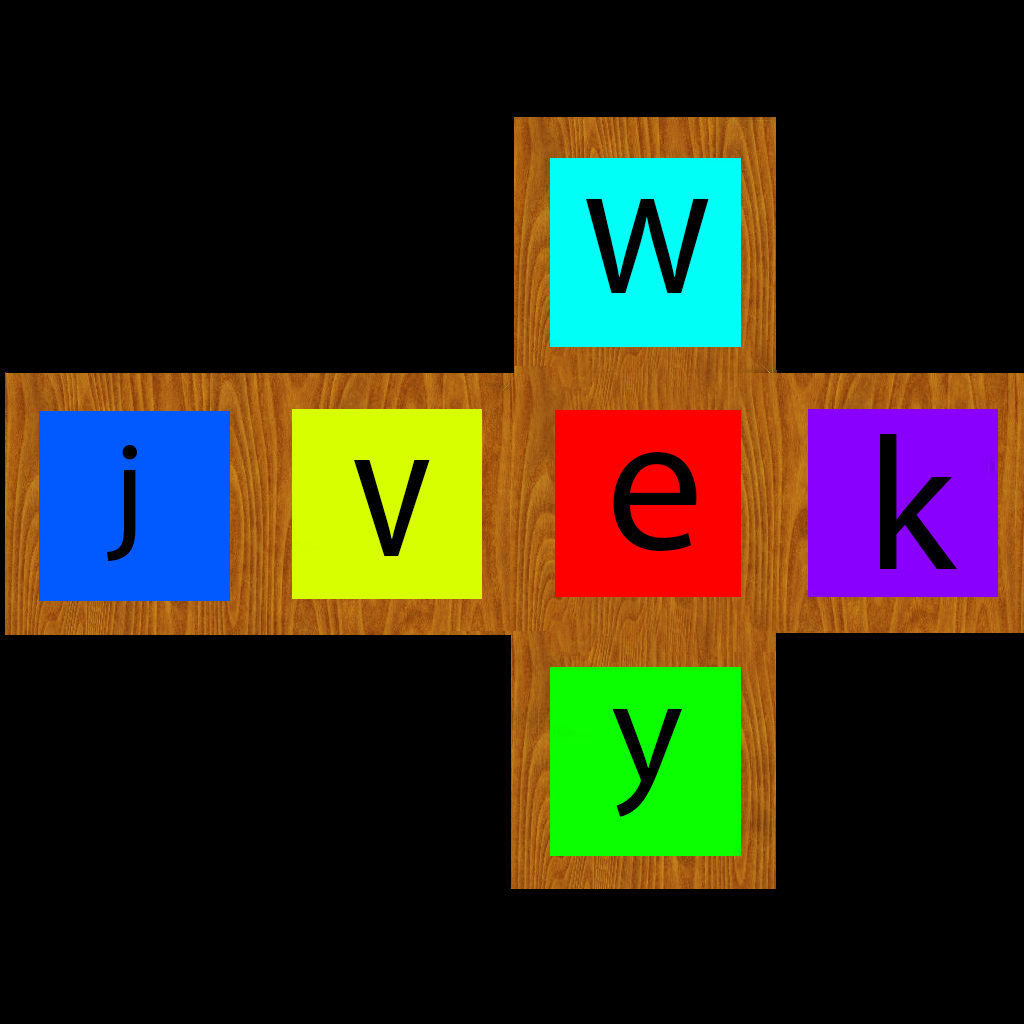
<style>
.page{position:relative;width:1024px;height:1024px;background:#000000}
.page>*{position:absolute;margin:0}
.t1{font:193.6px "MyriadPro-Regular";color:#000000;scale:0.9 1}
.t2{font:189.7px "MyriadPro-Regular";color:#000000}
.t3{font:132.1px "MyriadPro-Regular";color:#000000}
.t4{font:197.5px "MyriadPro-Regular";color:#000000;scale:0.84 1}
.t5{font:195.3px "MyriadPro-Regular";color:#000000}
.t6{font:152.9px "MyriadPro-Regular";color:#000000}
</style>
<div class="page">
<p class="t1" style="left:586px;top:198px;width:123px;height:95px">w</p>
<p class="t2" style="left:880px;top:434px;width:78px;height:135px">k</p>
<p class="t3" style="left:106px;top:444px;width:31px;height:117px">j</p>
<p class="t4" style="left:354px;top:460px;width:76px;height:96px">v</p>
<p class="t5" style="left:613px;top:452px;width:84px;height:99px">e</p>
<p class="t6" style="left:612px;top:709px;width:70px;height:108px">y</p>
</div>
